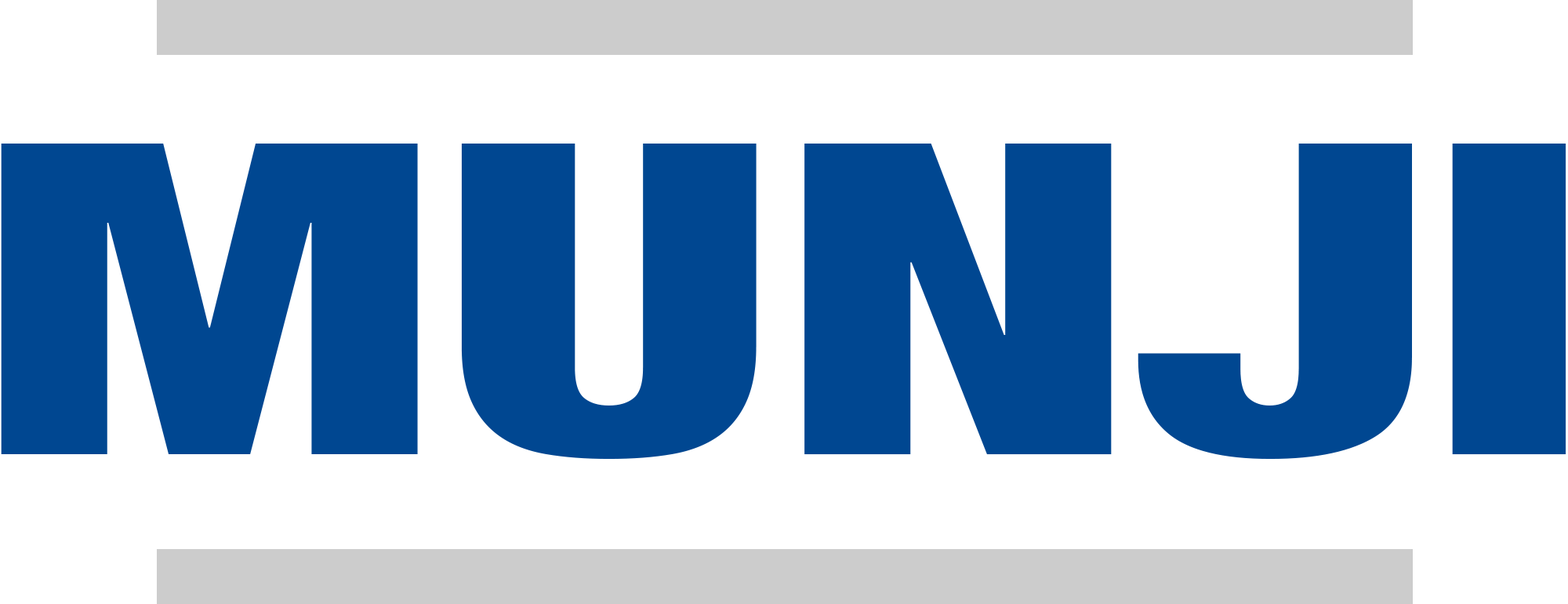
<style>
.page{position:relative;width:1568px;height:604px;background:#ffffff}
.page>*{position:absolute;margin:0}
.t1{font:434.5px "HelveticaNeue-CondensedBlack";color:#004791;scale:1.4 1}
</style>
<div class="page">
<p class="t1" style="left:1px;top:143px;width:1565px;height:316px">MUNJI</p>
</div>
